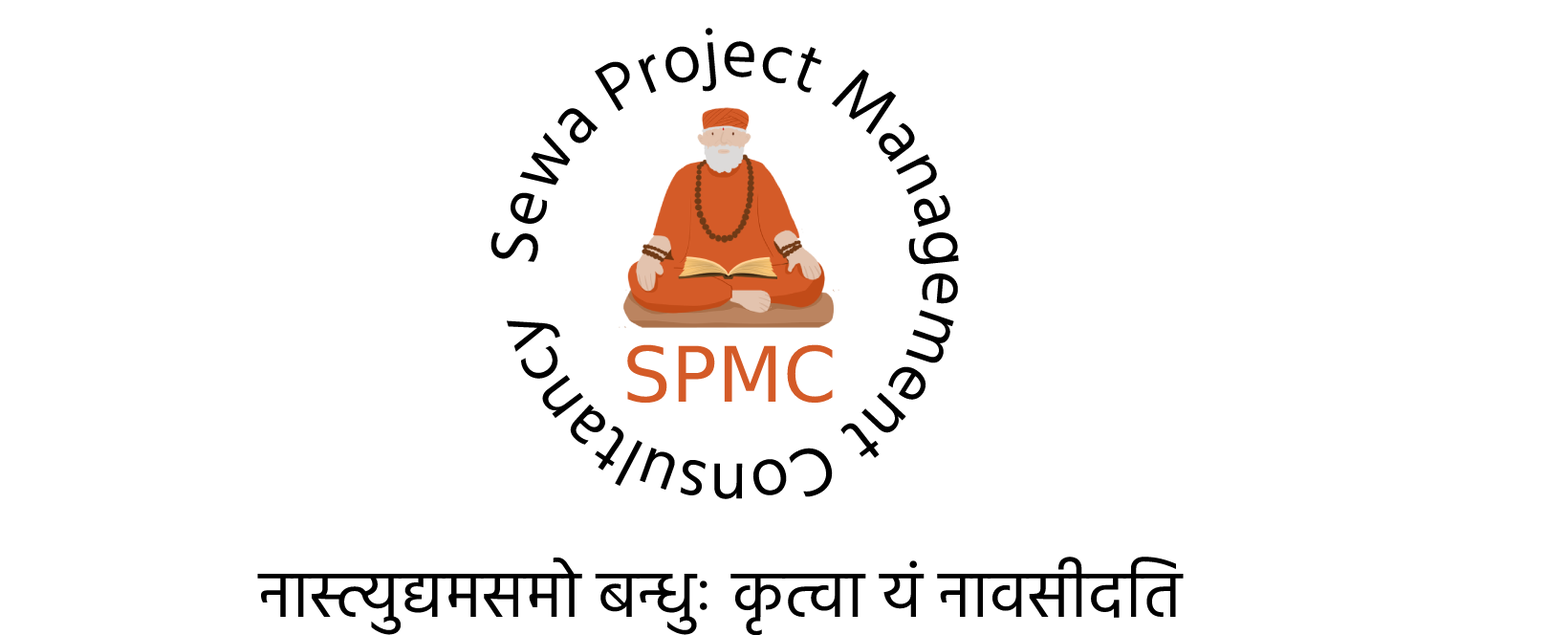
<style>
.page{position:relative;width:1568px;height:635px;background:#ffffff}
.page>*{position:absolute;margin:0}
.t1{font:68.8px "Hind-Regular";color:#000000}
.t2{font:76.5px "DejaVuSans";color:#d45b28}
.t3{font:66.9px "Hind-Regular";color:#000000}
</style>
<div class="page">
<p class="t1" style="left:490px;top:28px;width:469px;height:471px">Sewa Project Management Consultancy</p>
<p class="t2" style="left:627px;top:344px;width:206px;height:59px">SPMC</p>
<p class="t3" style="left:257px;top:556px;width:927px;height:80px">नास्त्युद्यमसमो बन्धुः कृत्वा यं नावसीदति</p>
</div>
